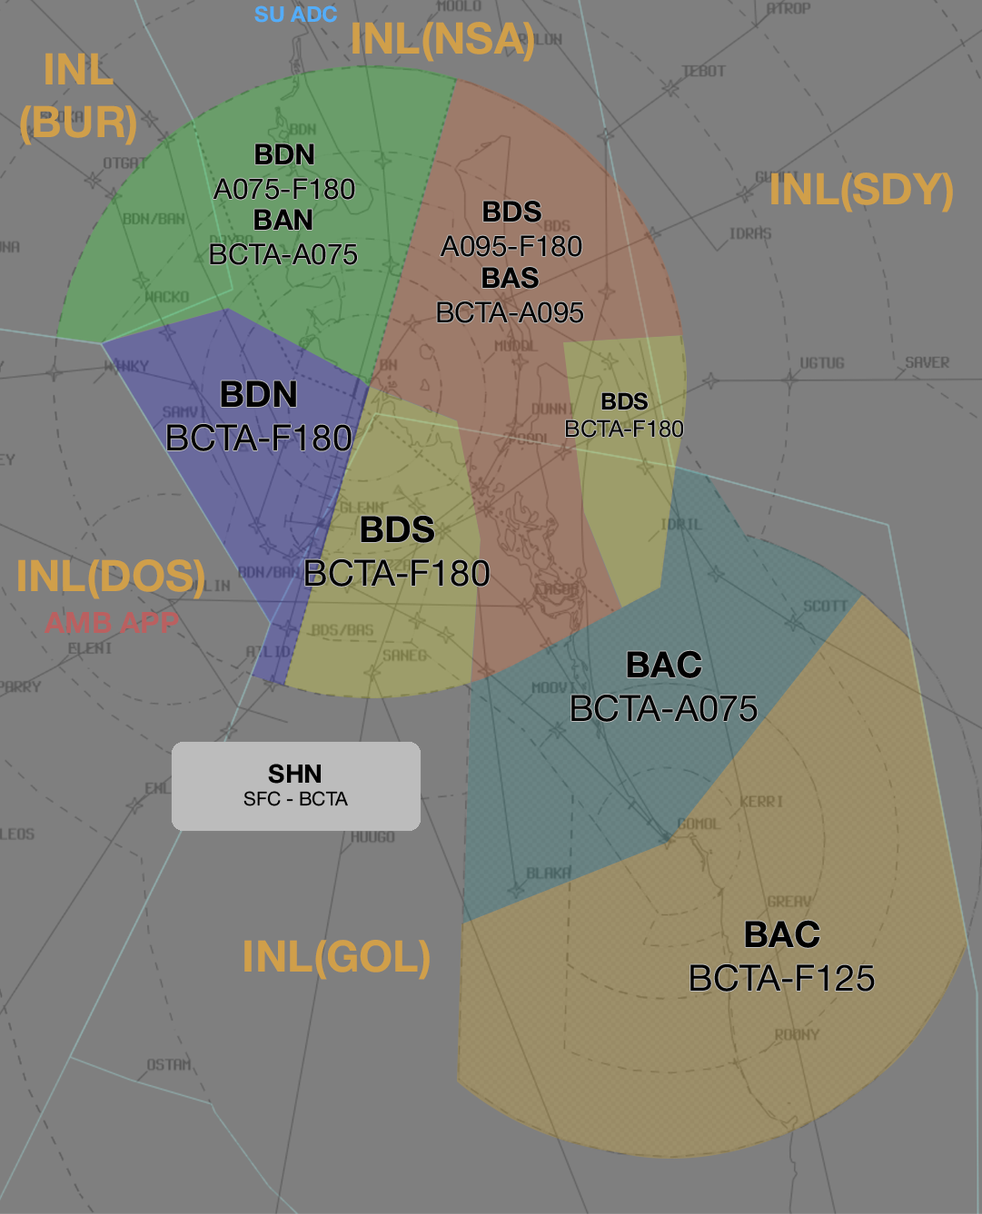
<style>
.page{position:relative;width:982px;height:1214px;background:#7f7f7f}
.page>*{position:absolute;margin:0}
.t1{font:21.7px "HelveticaNeue-Bold";color:#53adf9}
.t2{font:43.6px "HelveticaNeue-Bold";color:#d09f4a}
.t3{font:28.7px "HelveticaNeue-Roman";color:#000000}
.t4{font:28.7px "HelveticaNeue-Bold";color:#000000}
.t5{font:36.3px "HelveticaNeue-Roman";color:#000000}
.t6{font:36.3px "HelveticaNeue-Bold";color:#000000}
.t7{font:23.2px "HelveticaNeue-Roman";color:#000000}
.t8{font:23.2px "HelveticaNeue-Bold";color:#000000}
.t9{font:29.2px "HelveticaNeue-Bold";color:#ba6060}
.t10{font:19.2px "HelveticaNeue-Roman";color:#000000}
.t11{font:25.6px "HelveticaNeue-Bold";color:#000000}
</style>
<div class="page">
<p class="t1" style="left:254px;top:5px;width:83px;height:18px">SU ADC</p>
<p class="t2" style="left:352px;top:22px;width:182px;height:40px">INL(NSA)</p>
<p class="t2" style="left:20px;top:53px;width:116px;height:92px;text-align:center">INL<br>(BUR)</p>
<p class="t3" style="left:213px;top:144px;width:142px;height:56px;text-align:center"><span class="t4">BDN<br></span>A075-F180</p>
<p class="t2" style="left:771px;top:173px;width:182px;height:40px">INL(SDY)</p>
<p class="t3" style="left:210px;top:209px;width:147px;height:56px;text-align:center"><span class="t4">BAN<br></span>BCTA-A075</p>
<p class="t3" style="left:440px;top:201px;width:142px;height:56px;text-align:center"><span class="t4">BDS<br></span>A095-F180</p>
<p class="t3" style="left:437px;top:267px;width:146px;height:56px;text-align:center"><span class="t4">BAS<br></span>BCTA-A095</p>
<p class="t5" style="left:167px;top:381px;width:185px;height:70px;text-align:center"><span class="t6">BDN<br></span>BCTA-F180</p>
<p class="t7" style="left:566px;top:392px;width:117px;height:46px;text-align:center"><span class="t8">BDS<br></span>BCTA-F180</p>
<p class="t5" style="left:305px;top:516px;width:185px;height:71px;text-align:center"><span class="t6">BDS<br></span>BCTA-F180</p>
<p class="t2" style="left:18px;top:560px;width:186px;height:39px">INL(DOS)</p>
<p class="t9" style="left:44px;top:612px;width:135px;height:21px">AMB APP</p>
<p class="t5" style="left:571px;top:650px;width:187px;height:72px;text-align:center"><span class="t6">BAC<br></span>BCTA-A075</p>
<p class="t10" style="left:243px;top:764px;width:105px;height:43px;text-align:center"><span class="t11">SHN<br></span>SFC - BCTA</p>
<p class="t5" style="left:690px;top:920px;width:185px;height:72px;text-align:center"><span class="t6">BAC<br></span>BCTA-F125</p>
<p class="t2" style="left:244px;top:940px;width:186px;height:40px">INL(GOL)</p>
</div>
